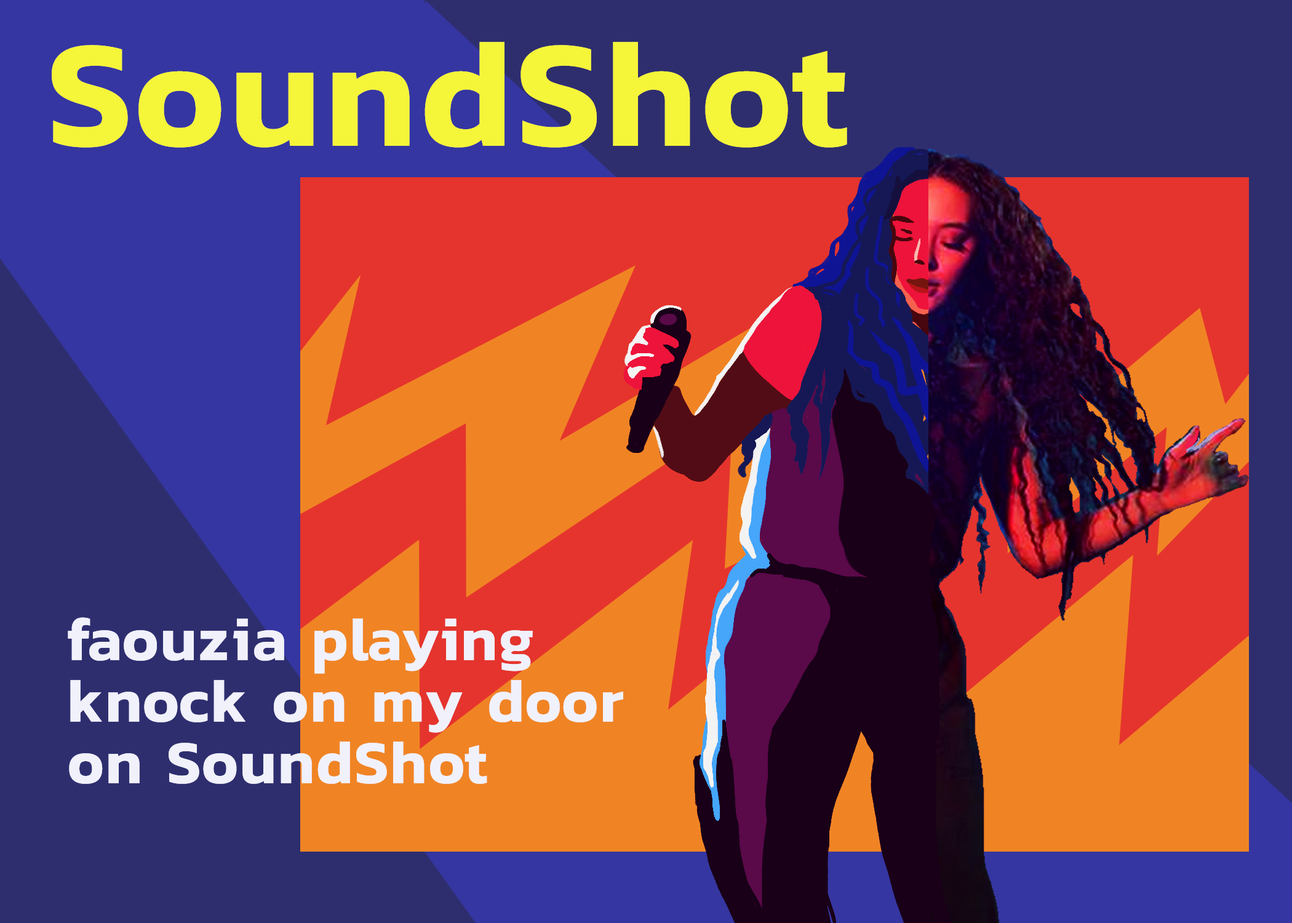
<style>
.page{position:relative;width:1292px;height:923px;background:#2e2e6f}
.page>*{position:absolute;margin:0}
.t1{font:153.8px "Kanit-SemiBold";letter-spacing:0.025em;color:#e0de2f}
.t2{font:61.5px/61.5px "Kanit-SemiBold";letter-spacing:0.025em;color:#f1f1fb}
</style>
<div class="page">
<p class="t1" style="left:52px;top:42px;width:795px;height:106px">SoundShot</p>
<p class="t2" style="left:68px;top:617px;width:555px;height:167px">faouzia playing<br>knock on my door<br>on SoundShot</p>
</div>
